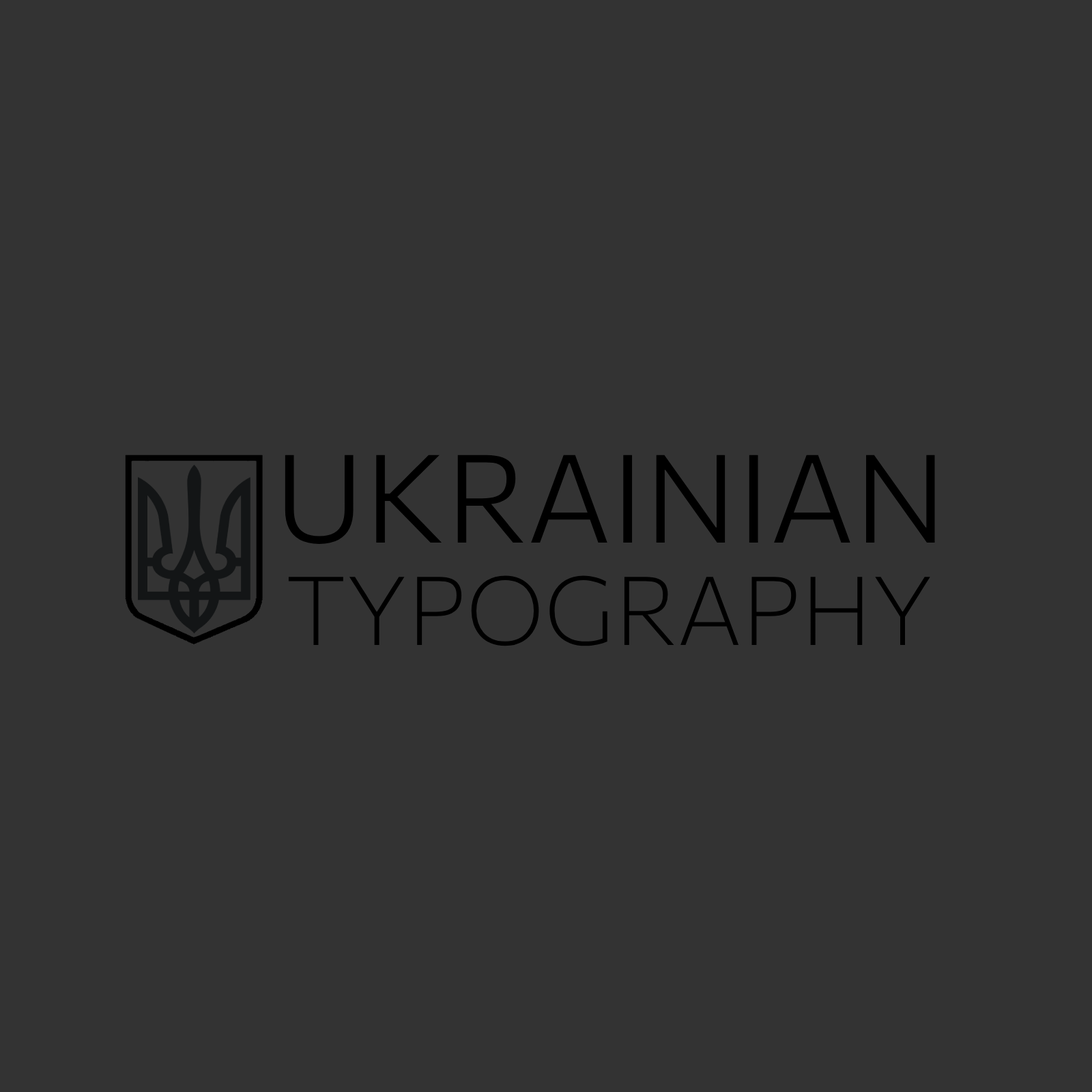
<style>
.page{position:relative;width:1092px;height:1092px;background:#333333}
.page>*{position:absolute;margin:0}
.t1{font:122.8px "Commissioner-Light";color:#000000}
.t2{font:95.5px "Commissioner-ExtraLight";color:#000000}
</style>
<div class="page">
<p class="t1" style="left:285px;top:455px;width:650px;height:89px">UKRAINIAN</p>
<p class="t2" style="left:288px;top:575px;width:642px;height:71px">TYPOGRAPHY</p>
</div>
